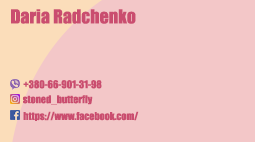
<style>
.page{position:relative;width:255px;height:142px;background:#f3c7c8}
.page>*{position:absolute;margin:0}
.t1{font:18px "Impact";color:#ca4d6f}
.t2{font:10px "Impact";color:#ca4d6f}
</style>
<div class="page">
<p class="t1" style="left:11px;top:9px;width:125px;height:15px">Daria Radchenko</p>
<p class="t2" style="left:23px;top:80px;width:79px;height:9px">+380-66-901-31-98</p>
<p class="t2" style="left:22px;top:95px;width:71px;height:10px">stoned_butterfly</p>
<p class="t2" style="left:23px;top:111px;width:116px;height:10px">https://www.facebook.com/</p>
</div>
